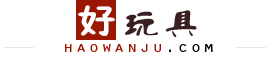
<style>
.page{position:relative;width:268px;height:59px;background:#ffffff}
.page>*{position:absolute;margin:0}
.t1{font:33.3px "FZSEJW--GB1-0";letter-spacing:0.06em;color:#ffffff;scale:1.17 1}
.t2{font:33.3px "FZLXTJW--GB1-0";letter-spacing:0.06em;color:#3a2020;scale:1.17 1}
.t3{font:15.4px "OratorStd";letter-spacing:0.1em;color:#9c1701;scale:1.18 1}
.t4{font:15.4px "OratorStd";letter-spacing:0.1em;color:#000000;scale:1.18 1}
</style>
<div class="page">
<p class="t1" style="left:78px;top:5px;width:37px;height:31px">好</p>
<p class="t2" style="left:125px;top:10px;width:72px;height:27px">玩具</p>
<p class="t3" style="left:65px;top:44px;width:148px;height:8px">haowanju<span class="t4">.com</span></p>
</div>
